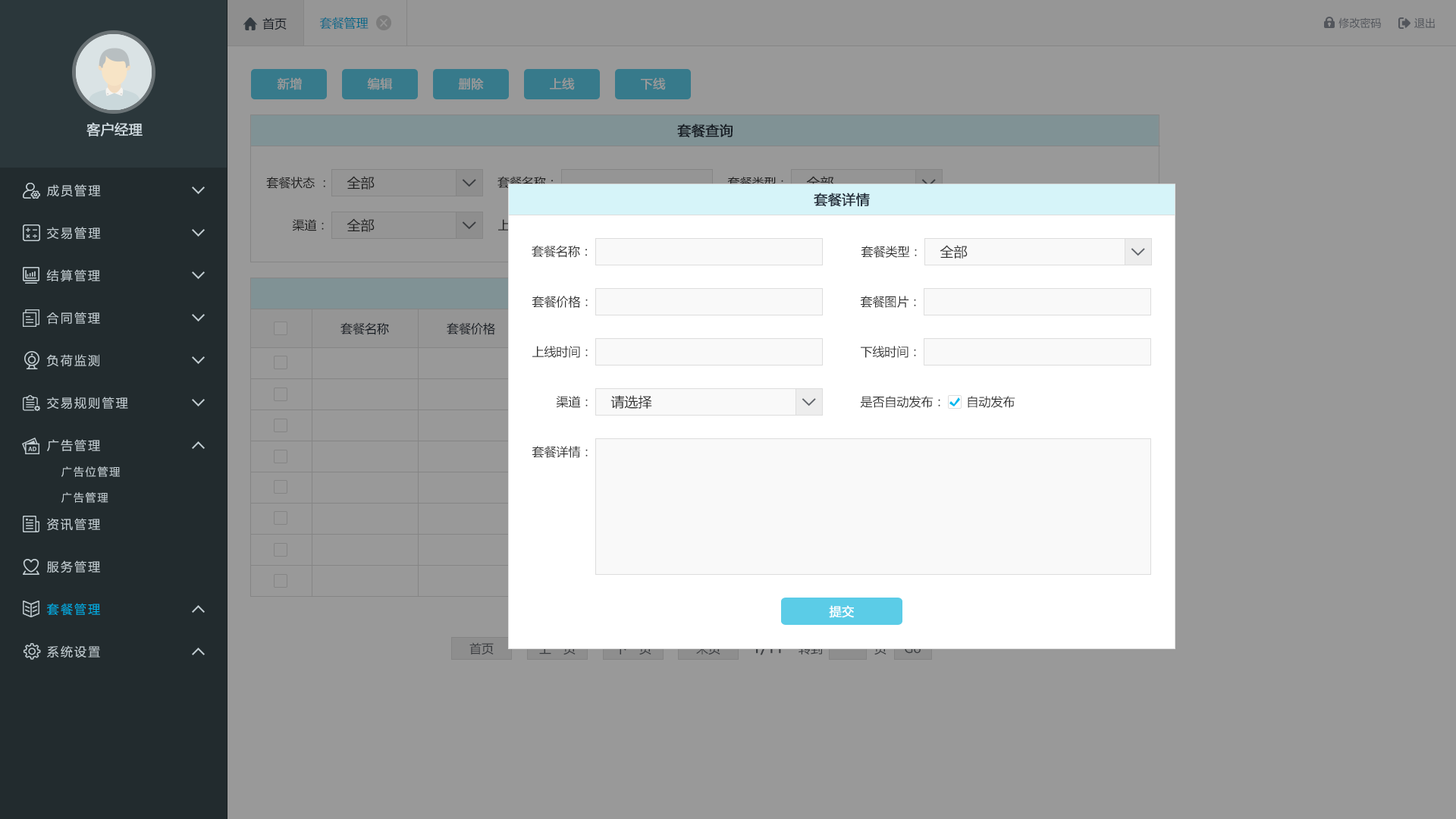
<style>
.page{position:relative;width:1456px;height:819px;background:#999999}
.page>*{position:absolute;margin:0}
.t1{font:12.1px "MicrosoftYaHei";color:#242e3b}
.t2{font:12.1px "MicrosoftYaHei";color:#006788}
.t3{font:10.6px "MicrosoftYaHei";color:#53565c}
.t4{font:12.1px "MicrosoftYaHei";color:#999999;font-weight:bold}
.t5{font:13.6px "MicrosoftYaHei";color:#d1dce2;font-weight:bold}
.t6{font:13.6px "MicrosoftYaHei";color:#242e3b;font-weight:bold}
.t7{font:12.1px "MicrosoftYaHei";letter-spacing:0.14em;color:#c2cdd2}
.t8{font:12.1px "MicrosoftYaHei";color:#333333}
.t9{font:13.6px "MicrosoftYaHei";color:#333333}
.t10{font:12.1px "MicrosoftYaHei"}
.t11{font:13.6px "MicrosoftYaHei"}
.t12{font:10.6px "MicrosoftYaHei";letter-spacing:0.14em;color:#c2cdd2}
.t13{font:12.1px "MicrosoftYaHei";letter-spacing:0.14em;color:#00ace2}
.t14{font:12.1px "MicrosoftYaHei";color:#ffffff;font-weight:bold}
.t15{font:12.1px "MicrosoftYaHei";color:#3a3d40}
</style>
<div class="page">
<p class="t1" style="left:262px;top:17px;width:25px;height:13px">首页</p>
<p class="t2" style="left:319px;top:17px;width:50px;height:13px">套餐管理</p>
<p class="t3" style="left:1338px;top:17px;width:43px;height:12px">修改密码</p>
<p class="t3" style="left:1414px;top:17px;width:21px;height:11px">退出</p>
<p class="t4" style="left:277px;top:77px;width:25px;height:13px">新增</p>
<p class="t4" style="left:367px;top:77px;width:26px;height:13px">编辑</p>
<p class="t4" style="left:458px;top:77px;width:26px;height:13px">删除</p>
<p class="t4" style="left:550px;top:77px;width:25px;height:13px">上线</p>
<p class="t4" style="left:641px;top:77px;width:25px;height:13px">下线</p>
<p class="t5" style="left:86px;top:122px;width:57px;height:14px">客户经理</p>
<p class="t6" style="left:677px;top:124px;width:56px;height:14px">套餐查询</p>
<p class="t7" style="left:47px;top:184px;width:54px;height:13px">成员管理</p>
<p class="t8" style="left:266px;top:177px;width:59px;height:12px">套餐状态 ：</p>
<p class="t9" style="left:347px;top:176px;width:28px;height:14px">全部</p>
<p class="t8" style="left:497px;top:176px;width:56px;height:13px">套餐名称：</p>
<p class="t10" style="left:727px;top:177px;width:56px;height:12px">套餐类型：</p>
<p class="t11" style="left:806px;top:176px;width:28px;height:14px">全部</p>
<p class="t6" style="left:814px;top:193px;width:56px;height:14px">套餐详情</p>
<p class="t8" style="left:292px;top:219px;width:32px;height:12px">渠道：</p>
<p class="t9" style="left:347px;top:218px;width:28px;height:14px">全部</p>
<p class="t7" style="left:47px;top:227px;width:54px;height:13px">交易管理</p>
<p class="t8" style="left:532px;top:245px;width:55px;height:13px">套餐名称：</p>
<p class="t8" style="left:861px;top:246px;width:56px;height:12px">套餐类型：</p>
<p class="t9" style="left:940px;top:245px;width:28px;height:14px">全部</p>
<p class="t7" style="left:46px;top:269px;width:54px;height:13px">结算管理</p>
<p class="t8" style="left:532px;top:296px;width:56px;height:12px">套餐价格：</p>
<p class="t8" style="left:860px;top:296px;width:56px;height:12px">套餐图片：</p>
<p class="t7" style="left:46px;top:312px;width:54px;height:13px">合同管理</p>
<p class="t1" style="left:340px;top:322px;width:49px;height:13px">套餐名称</p>
<p class="t1" style="left:447px;top:322px;width:48px;height:13px">套餐价格</p>
<p class="t8" style="left:532px;top:346px;width:56px;height:12px">上线时间：</p>
<p class="t8" style="left:861px;top:346px;width:55px;height:12px">下线时间：</p>
<p class="t7" style="left:46px;top:354px;width:53px;height:13px">负荷监测</p>
<p class="t7" style="left:47px;top:397px;width:81px;height:12px">交易规则管理</p>
<p class="t8" style="left:556px;top:396px;width:32px;height:12px">渠道：</p>
<p class="t9" style="left:610px;top:395px;width:42px;height:14px">请选择</p>
<p class="t8" style="left:860px;top:396px;width:80px;height:12px">是否自动发布：</p>
<p class="t8" style="left:968px;top:396px;width:47px;height:12px">自动发布</p>
<p class="t7" style="left:47px;top:439px;width:53px;height:12px">广告管理</p>
<p class="t8" style="left:532px;top:446px;width:56px;height:12px">套餐详情：</p>
<p class="t12" style="left:61px;top:466px;width:59px;height:11px">广告位管理</p>
<p class="t12" style="left:61px;top:492px;width:47px;height:11px">广告管理</p>
<p class="t7" style="left:47px;top:518px;width:53px;height:13px">资讯管理</p>
<p class="t7" style="left:47px;top:560px;width:53px;height:13px">服务管理</p>
<p class="t13" style="left:47px;top:603px;width:53px;height:13px">套餐管理</p>
<p class="t14" style="left:829px;top:605px;width:25px;height:13px">提交</p>
<p class="t7" style="left:47px;top:645px;width:53px;height:13px">系统设置</p>
<p class="t15" style="left:469px;top:642px;width:25px;height:13px">首页</p>
</div>
